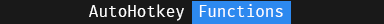
<style>
.page{position:relative;width:384px;height:24px;background:#191919}
.page>*{position:absolute;margin:0}
.t1{font:16px "FiraCode-Regular";color:#ffffff}
</style>
<div class="page">
<p class="t1" style="left:89px;top:4px;width:95px;height:17px">AutoHotkey</p>
<p class="t1" style="left:199px;top:4px;width:84px;height:13px">Functions</p>
</div>
